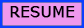
<style>
.page{position:relative;width:84px;height:28px;background:#ee98ed}
.page>*{position:absolute;margin:0}
.t1{font:15px "Verdana";color:#000000;font-weight:bold}
</style>
<div class="page">
<p class="t1" style="left:10px;top:6px;width:65px;height:12px">RESUME</p>
</div>
